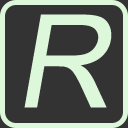
<style>
.page{position:relative;width:128px;height:128px;background:#333333}
.page>*{position:absolute;margin:0}
.t1{font:129.6px "ArialMT";color:#ddf7da;font-style:italic}
</style>
<div class="page">
<p class="t1" style="left:24px;top:14px;width:88px;height:94px">R</p>
</div>
